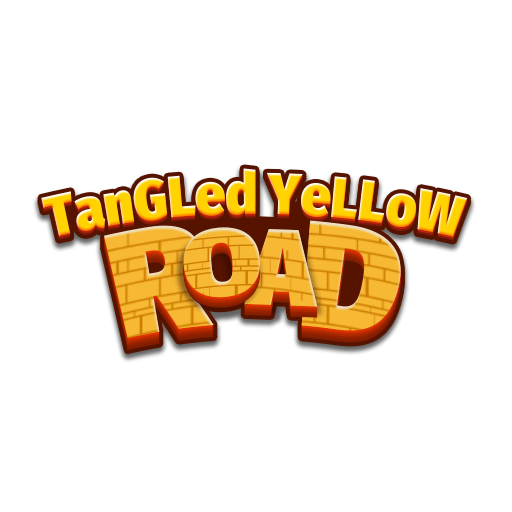
<style>
.page{position:relative;width:512px;height:512px;background:#ffffff}
.page>*{position:absolute;margin:0}
.t1{font:60px "FiraSans-Ultra";color:#ffd200;scale:0.83 1}
.t2{font:150px "FiraSans-Ultra";scale:0.83 1}
.t3{font:93.7px "FiraSans-Ultra";scale:1.22 1}
.t4{font:108.3px "FiraSans-Ultra"}
</style>
<div class="page">
<p class="t1" style="left:41px;top:168px;width:427px;height:69px">TanGLed YeLLoW</p>
<p class="t2" style="left:104px;top:220px;width:297px;height:119px">R   D</p>
<p class="t3" style="left:183px;top:228px;width:77px;height:71px;rotate:-4deg">O</p>
<p class="t3" style="left:183px;top:227px;width:77px;height:71px;rotate:-4deg">O</p>
<p class="t4" style="left:244px;top:230px;width:74px;height:78px;rotate:2deg">A</p>
<p class="t4" style="left:244px;top:229px;width:74px;height:78px;rotate:2deg">A</p>
</div>
